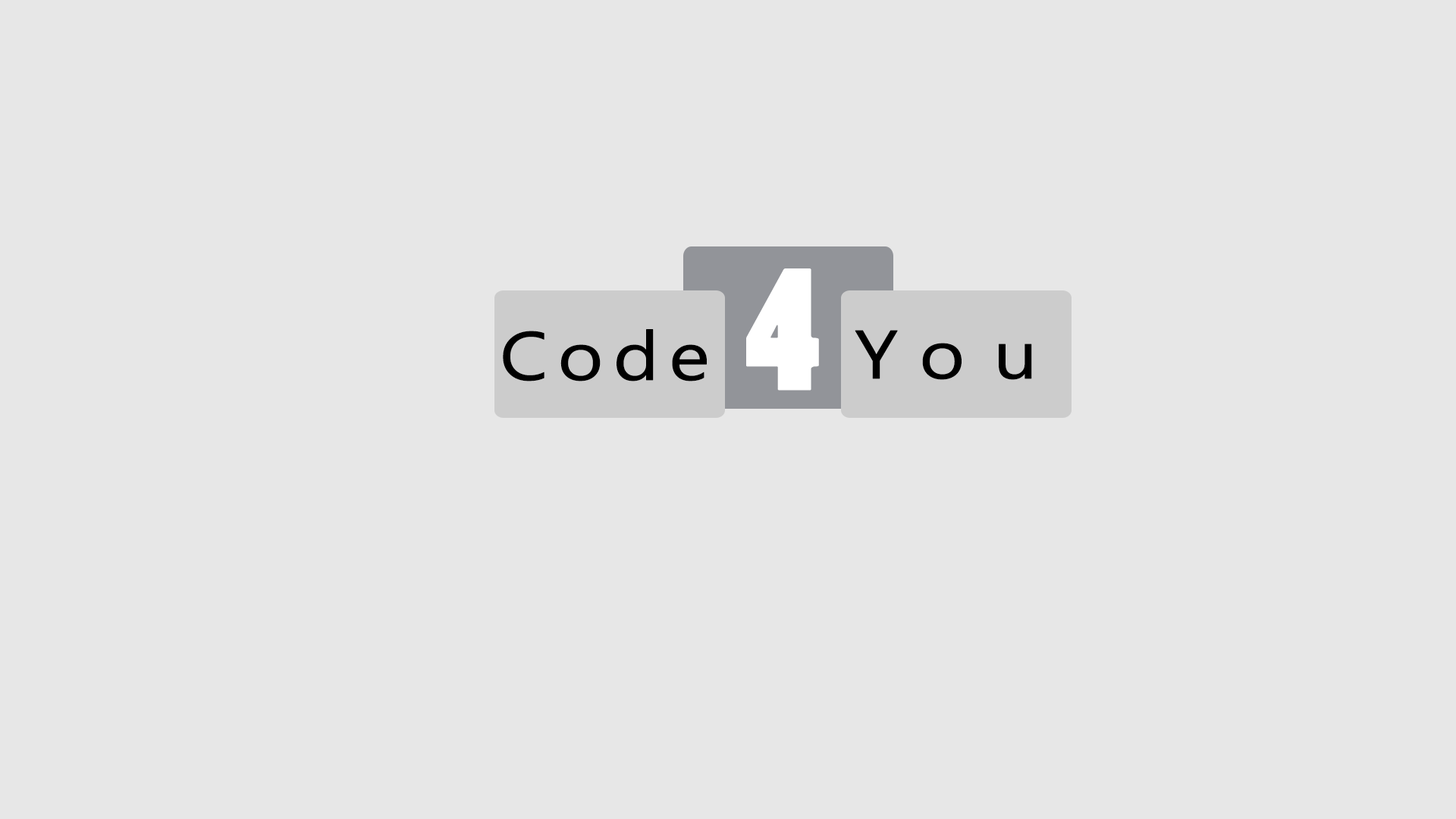
<style>
.page{position:relative;width:1456px;height:819px;background:#e7e7e7}
.page>*{position:absolute;margin:0}
.t1{font:164.3px "PoplarStd";letter-spacing:0.545em;color:#ffffff}
.t2{font:68.2px "SegoeUIHistoric";letter-spacing:0.1em;color:#000000;font-weight:bold;scale:1.14 1}
.t3{font:68.2px "SegoeUIHistoric";letter-spacing:0.34em;color:#000000;font-weight:bold;scale:1.14 1}
</style>
<div class="page">
<p class="t1" style="left:746px;top:268px;width:73px;height:123px">4</p>
<p class="t2" style="left:503px;top:329px;width:204px;height:52px">Code</p>
<p class="t3" style="left:855px;top:330px;width:177px;height:50px">You</p>
</div>
